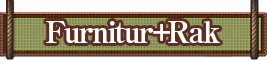
<style>
.page{position:relative;width:267px;height:61px;background:#ffffff}
.page>*{position:absolute;margin:0}
.t1{font:30px "RyuminPro-ExBold";letter-spacing:-0.08em;color:#fffff7}
</style>
<div class="page">
<p class="t1" style="left:46px;top:21px;width:174px;height:22px">Furnitur+Rak</p>
</div>
